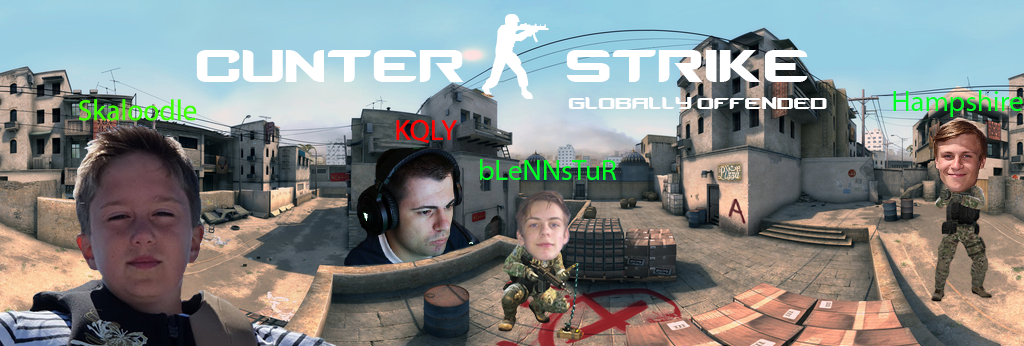
<style>
.page{position:relative;width:1024px;height:346px}
.page>*{position:absolute;margin:0}
.t1{font:62.5px "Counter-StrikeRegular";color:#fefefe}
.t2{font:100px "Counter-StrikeRegular";color:#fefefe}
.t3{font:29.2px "MyriadPro-Regular";color:#42ff00}
.t4{font:22.9px "Counter-StrikeRegular";color:#fefefe}
.t5{font:29.2px "MyriadPro-Regular";color:#00ff24}
.t6{font:29.2px "MyriadPro-Regular";color:#ff0000}
</style>
<div class="page">
<p class="t1" style="left:196px;top:14px;width:612px;height:85px">CUNTER <span class="t2">-</span> STRIKE</p>
<p class="t3" style="left:79px;top:99px;width:118px;height:22px">Skaloodle</p>
<p class="t4" style="left:568px;top:97px;width:259px;height:12px">GLOBALLY OFFENDED</p>
<p class="t5" style="left:893px;top:90px;width:130px;height:27px">Hampshire</p>
<p class="t6" style="left:396px;top:119px;width:61px;height:24px">KQLY</p>
<p class="t5" style="left:480px;top:159px;width:137px;height:21px">bLeNNsTuR</p>
</div>
